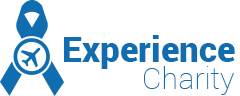
<style>
.page{position:relative;width:240px;height:96px;background:#ffffff}
.page>*{position:absolute;margin:0}
.t1{font:34.6px "Roboto-Black";color:#106db0}
.t2{font:30px "Roboto-Thin";color:#106db0}
</style>
<div class="page">
<p class="t1" style="left:64px;top:35px;width:171px;height:34px">Experience</p>
<p class="t2" style="left:144px;top:66px;width:90px;height:29px">Charity</p>
</div>
